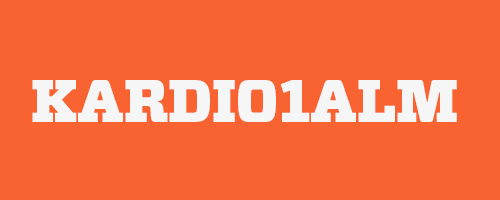
<style>
.page{position:relative;width:500px;height:200px;background:#f96332}
.page>*{position:absolute;margin:0}
.t1{font:60px "Vitesse-Black";letter-spacing:-0.005em;color:#f6f6f6}
</style>
<div class="page">
<p class="t1" style="left:32px;top:80px;width:425px;height:42px">KARDIO1ALM</p>
</div>
